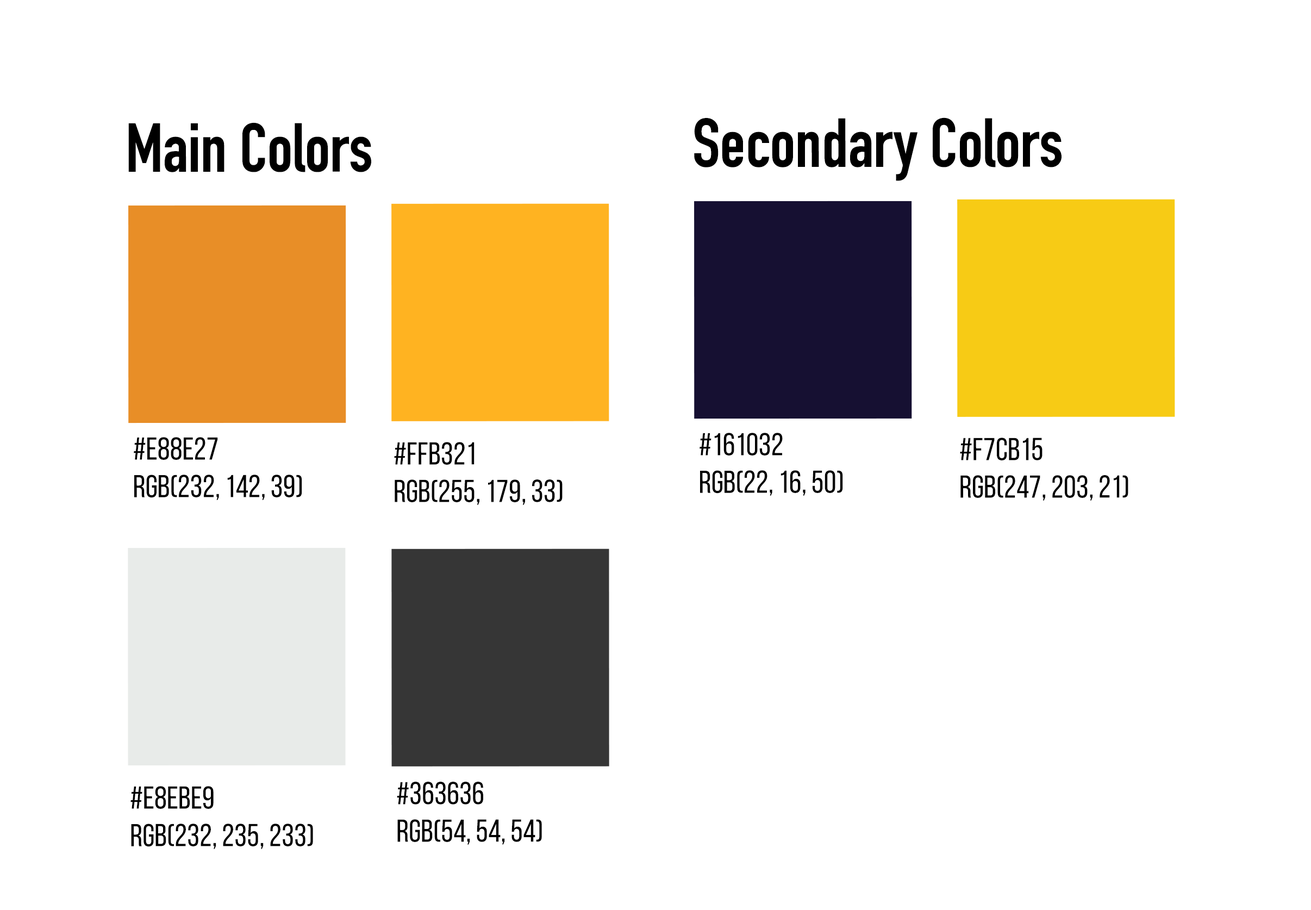
<style>
.page{position:relative;width:1311px;height:910px;background:#ffffff}
.page>*{position:absolute;margin:0}
.t1{font:67.9px "DINCondensed-Bold";color:#000000}
.t2{font:31.7px/3.4px "BebasNeueRegular";color:#000000}
</style>
<div class="page">
<p class="t1" style="left:128px;top:122px;width:243px;height:50px">Main Colors</p>
<p class="t1" style="left:694px;top:117px;width:367px;height:64px">Secondary Colors</p>
<p class="t2" style="left:134px;top:437px;width:168px;height:63px">#e88e27<br>rgb(232, 142, 39)</p>
<p class="t2" style="left:699px;top:433px;width:144px;height:63px">#161032<br>rgb(22, 16, 50)</p>
<p class="t2" style="left:960px;top:437px;width:168px;height:64px">#F7CB15<br>rgb(247, 203, 21)</p>
<p class="t2" style="left:394px;top:442px;width:168px;height:63px">#FFB321<br>rgb(255, 179, 33)</p>
<p class="t2" style="left:130px;top:786px;width:183px;height:63px">#e8ebe9<br>rgb(232, 235, 233)</p>
<p class="t2" style="left:397px;top:781px;width:145px;height:64px">#363636<br>rgb(54, 54, 54)</p>
</div>
